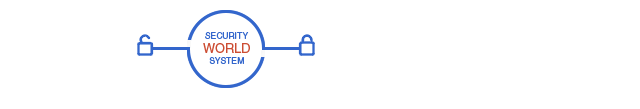
<style>
.page{position:relative;width:640px;height:109px;background:#ffffff}
.page>*{position:absolute;margin:0}
.t1{font:8.4px "Helvetica";color:#3366cc}
.t2{font:12.6px "Helvetica";color:#cc4d33}
</style>
<div class="page">
<p class="t1" style="left:205px;top:32px;width:44px;height:7px">SECURITY</p>
<p class="t2" style="left:203px;top:43px;width:47px;height:10px">WORLD</p>
<p class="t1" style="left:209px;top:57px;width:35px;height:7px">SYSTEM</p>
</div>
